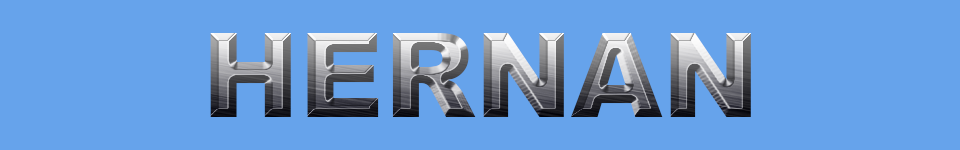
<style>
.page{position:relative;width:960px;height:150px;background:#66a3eb}
.page>*{position:absolute;margin:0}
.t1{font:117.1px "Arial-Black"}
</style>
<div class="page">
<p class="t1" style="left:210px;top:33px;width:541px;height:84px">HERNAN</p>
</div>
